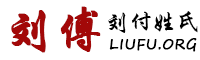
<style>
.page{position:relative;width:200px;height:60px;background:#ffffff}
.page>*{position:absolute;margin:0}
.t1{font:50px "STXingkai";color:#a20808;font-weight:bold}
.t2{font:25px "STXingkai";letter-spacing:-0.075em;color:#000000}
.t3{font:14px "SegoePrint";letter-spacing:0.05em;color:#000000;font-weight:bold}
</style>
<div class="page">
<p class="t1" style="left:11px;top:6px;width:90px;height:47px">刘傅</p>
<p class="t2" style="left:108px;top:11px;width:90px;height:22px">刘付姓氏</p>
<p class="t3" style="left:109px;top:38px;width:88px;height:14px">LIUFU.ORG</p>
</div>
